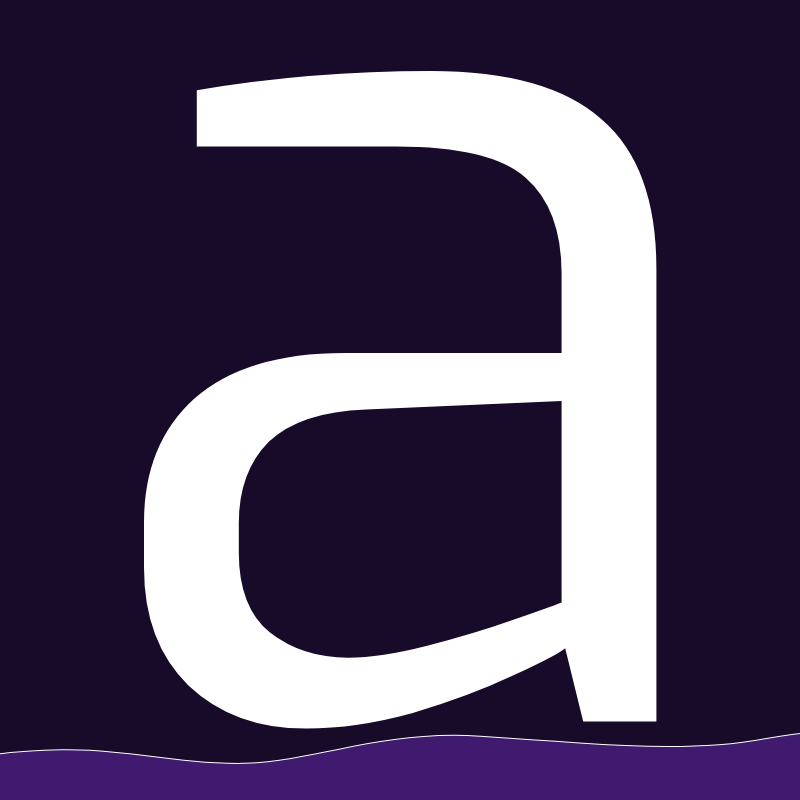
<style>
.page{position:relative;width:800px;height:800px;background:#180a29}
.page>*{position:absolute;margin:0}
.t1{font:1200px "Exo-Regular";color:#ffffff}
</style>
<div class="page">
<p class="t1" style="left:144px;top:71px;width:513px;height:658px">a</p>
</div>
